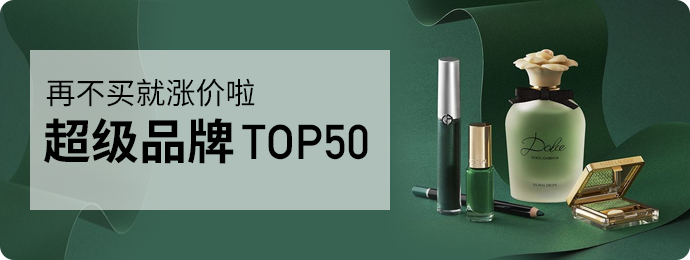
<style>
.page{position:relative;width:690px;height:260px}
.page>*{position:absolute;margin:0}
.t1{font:30px "SourceHanSansCN-Regular";color:#000000}
.t2{font:48px "SourceHanSansCN-Bold";color:#000000}
.t3{font:48px "DINAlternate-Bold";color:#000000}
</style>
<div class="page">
<p class="t1" style="left:46px;top:78px;width:209px;height:29px">再不买就涨价啦</p>
<p class="t2" style="left:44px;top:118px;width:190px;height:46px">超级品牌</p>
<p class="t3" style="left:242px;top:124px;width:126px;height:36px">TOP50</p>
</div>
